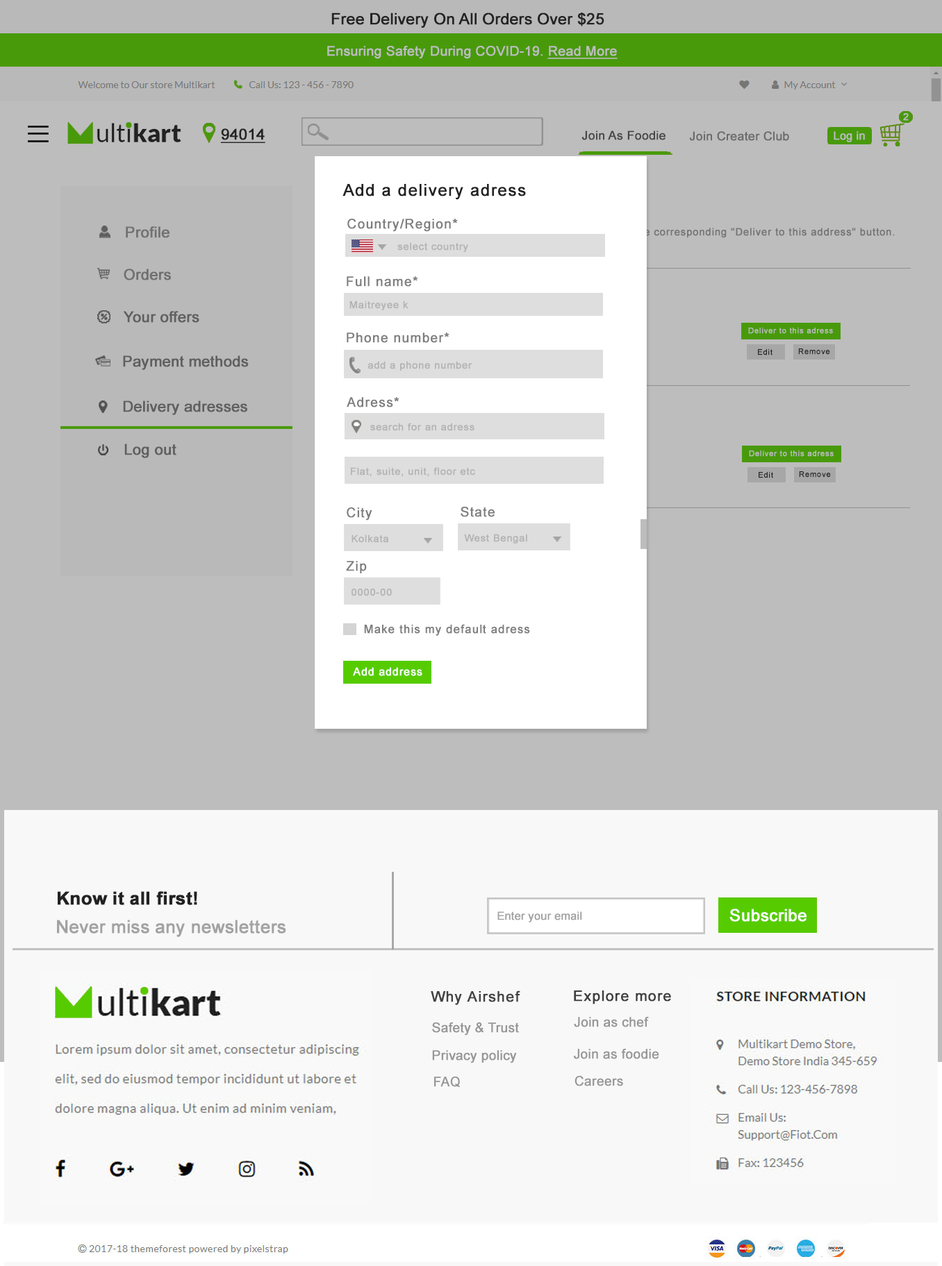
<style>
.page{position:relative;width:942px;height:1266px;background:#bdbdbd}
.page>*{position:absolute;margin:0}
.t1{font:15.6px "ArialMT";color:#222222;font-weight:bold}
.t2{font:13.3px "ArialMT";color:#bdbdbd;font-weight:bold}
.t3{font:13.3px "ArialMT";color:#bdbdbd;font-weight:bold;text-decoration:underline}
.t4{font:9.9px "ArialMT";color:#bdbdbd;font-weight:bold}
.t5{font:15.2px "ArialMT";color:#222222;font-weight:bold;text-decoration:underline}
.t6{font:12.2px "ArialMT";color:#585757;font-weight:bold}
.t7{font:12.2px "ArialMT";color:#6c6a6a;font-weight:bold}
.t8{font:11.1px "ArialMT";color:#bdbdbd;font-weight:bold}
.t9{font:16.4px "ArialMT";letter-spacing:0.05em;color:#222222;font-weight:bold}
.t10{font:13.1px "ArialMT";letter-spacing:0.05em;color:#7e7e7e;font-weight:bold}
.t11{font:14.9px "ArialMT";color:#717171;font-weight:bold}
.t12{font:9.8px "ArialMT";letter-spacing:0.05em;color:#b3b3b3;font-weight:bold}
.t13{font:14.9px "ArialMT";color:#6f6f6f;font-weight:bold}
.t14{font:8px "ArialMT";letter-spacing:0.05em;color:#ffffff;font-weight:bold}
.t15{font:14.9px "ArialMT";color:#5f5f5f;font-weight:bold}
.t16{font:7.7px "ArialMT";letter-spacing:0.05em;color:#bdbdbd;font-weight:bold}
.t17{font:7.7px "ArialMT";letter-spacing:0.05em;color:#262626;font-weight:bold}
.t18{font:11.5px "ArialMT";letter-spacing:0.05em;color:#7f7f7f;font-weight:bold}
.t19{font:10.8px "ArialMT";letter-spacing:0.05em;color:#ffffff;font-weight:bold}
.t20{font:17.8px "Arial-BoldMT";color:#222222;font-weight:bold}
.t21{font:11.1px "ArialMT";color:#a3a2a2;font-weight:bold}
.t22{font:16.7px "ArialMT";color:#ffffff;font-weight:bold}
.t23{font:17.8px "ArialMT";color:#a3a2a2;font-weight:bold}
.t24{font:14.4px "ArialMT";letter-spacing:0.05em;color:#414141;font-weight:bold}
.t25{font:14.4px "ArialMT";letter-spacing:0.05em;color:#3e3e3e;font-weight:bold}
.t26{font:13.1px "ArialMT";color:#979696;font-weight:bold}
.t27{font:13.1px "ArialMT";color:#989797;font-weight:bold}
</style>
<div class="page">
<p class="t1" style="left:331px;top:12px;width:273px;height:16px">Free Delivery On All Orders Over $25</p>
<p class="t2" style="left:327px;top:46px;width:290px;height:13px">Ensuring Safety During COVID-19. <span class="t3">Read More</span></p>
<p class="t4" style="left:903px;top:113px;width:5px;height:8px">2</p>
<p class="t5" style="left:220px;top:128px;width:45px;height:15px">94014</p>
<p class="t6" style="left:581px;top:131px;width:84px;height:9px">Join As Foodie</p>
<p class="t7" style="left:689px;top:131px;width:100px;height:10px">Join Creater Club</p>
<p class="t8" style="left:833px;top:131px;width:31px;height:11px">Log in</p>
<p class="t9" style="left:342px;top:184px;width:184px;height:16px">Add a delivery adress</p>
<p class="t10" style="left:347px;top:219px;width:111px;height:13px">Country/Region*</p>
<p class="t11" style="left:126px;top:226px;width:43px;height:12px">Profile</p>
<p class="t12" style="left:397px;top:242px;width:71px;height:10px">select country</p>
<p class="t13" style="left:124px;top:269px;width:47px;height:12px">Orders</p>
<p class="t10" style="left:346px;top:276px;width:72px;height:11px">Full name*</p>
<p class="t14" style="left:346px;top:287px;width:56px;height:8px">Maitreyee kar</p>
<p class="t12" style="left:349px;top:301px;width:59px;height:9px">Maitreyee k</p>
<p class="t15" style="left:123px;top:311px;width:76px;height:12px">Your offers</p>
<p class="t16" style="left:748px;top:328px;width:85px;height:6px">Deliver to this adress</p>
<p class="t10" style="left:346px;top:333px;width:103px;height:10px">Phone number*</p>
<p class="t17" style="left:758px;top:349px;width:14px;height:7px">Edit</p>
<p class="t17" style="left:798px;top:349px;width:32px;height:6px">Remove</p>
<p class="t15" style="left:123px;top:356px;width:126px;height:14px">Payment methods</p>
<p class="t12" style="left:367px;top:361px;width:105px;height:10px">add a phone number</p>
<p class="t15" style="left:123px;top:401px;width:124px;height:14px">Delivery adresses</p>
<p class="t10" style="left:346px;top:397px;width:53px;height:11px">Adress*</p>
<p class="t12" style="left:370px;top:423px;width:104px;height:8px">search for an adress</p>
<p class="t15" style="left:124px;top:444px;width:52px;height:14px">Log out</p>
<p class="t16" style="left:749px;top:451px;width:84px;height:6px">Deliver to this adress</p>
<p class="t12" style="left:351px;top:467px;width:124px;height:10px">Flat, suite, unit, floor etc</p>
<p class="t17" style="left:758px;top:472px;width:15px;height:6px">Edit</p>
<p class="t17" style="left:798px;top:471px;width:32px;height:7px">Remove</p>
<p class="t10" style="left:346px;top:508px;width:26px;height:13px">City</p>
<p class="t10" style="left:460px;top:507px;width:34px;height:10px">State</p>
<p class="t12" style="left:464px;top:534px;width:63px;height:10px">West Bengal</p>
<p class="t12" style="left:351px;top:535px;width:38px;height:8px">Kolkata</p>
<p class="t10" style="left:346px;top:561px;width:21px;height:13px">Zip</p>
<p class="t12" style="left:351px;top:589px;width:41px;height:7px">0000-00</p>
<p class="t18" style="left:364px;top:624px;width:166px;height:12px">Make this my default adress</p>
<p class="t19" style="left:353px;top:667px;width:69px;height:9px">Add address</p>
<p class="t20" style="left:58px;top:892px;width:139px;height:13px">Know it all first!</p>
<p class="t21" style="left:497px;top:912px;width:85px;height:11px">Enter your email</p>
<p class="t22" style="left:729px;top:909px;width:77px;height:13px">Subscribe</p>
<p class="t23" style="left:57px;top:920px;width:229px;height:17px">Never miss any newsletters</p>
<p class="t24" style="left:430px;top:991px;width:90px;height:14px">Why Airshef</p>
<p class="t25" style="left:574px;top:991px;width:97px;height:14px">Explore more</p>
<p class="t26" style="left:432px;top:1023px;width:87px;height:13px">Safety &amp; Trust</p>
<p class="t27" style="left:574px;top:1017px;width:75px;height:11px">Join as chef</p>
<p class="t27" style="left:574px;top:1049px;width:85px;height:11px">Join as foodie</p>
<p class="t26" style="left:432px;top:1051px;width:85px;height:13px">Privacy policy</p>
<p class="t26" style="left:434px;top:1077px;width:26px;height:11px">FAQ</p>
<p class="t27" style="left:574px;top:1076px;width:49px;height:11px">Careers</p>
</div>
